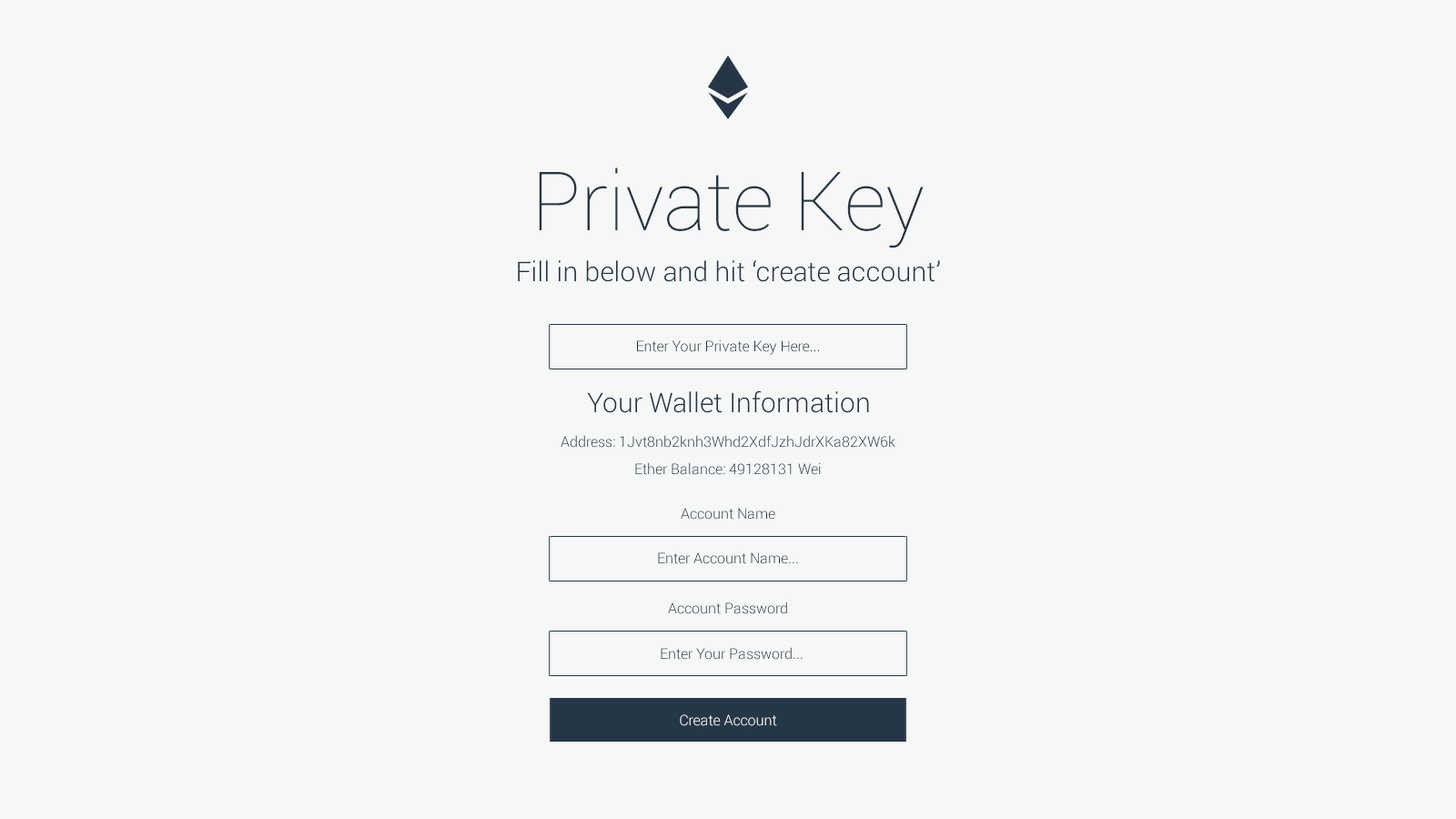
<style>
.page{position:relative;width:1456px;height:819px;background:#f6f7f7}
.page>*{position:absolute;margin:0}
.t1{font:81.9px "Roboto-Thin";color:#253746}
.t2{font:27.3px "Roboto-Light";color:#253746}
.t3{font:14.6px "Roboto-Light";color:#253746}
.t4{font:14.6px/27.3px "Roboto-Light";color:#253746}
.t5{font:14.6px "Roboto-Light";color:#ffffff}
</style>
<div class="page">
<p class="t1" style="left:539px;top:167px;width:385px;height:81px">Private Key</p>
<p class="t2" style="left:518px;top:260px;width:422px;height:22px">Fill in below and hit ‘create account’</p>
<p class="t3" style="left:637px;top:339px;width:182px;height:16px">Enter Your Private Key Here...</p>
<p class="t2" style="left:587px;top:390px;width:282px;height:23px">Your Wallet Information</p>
<p class="t4" style="left:561px;top:435px;width:334px;height:40px;text-align:center">Address: 1Jvt8nb2knh3Whd2XdfJzhJdrXKa82XW6k<br>Ether Balance: 49128131 Wei</p>
<p class="t3" style="left:681px;top:508px;width:94px;height:12px">Account Name</p>
<p class="t3" style="left:658px;top:552px;width:140px;height:12px">Enter Account Name...</p>
<p class="t3" style="left:668px;top:602px;width:119px;height:12px">Account Password</p>
<p class="t3" style="left:661px;top:647px;width:142px;height:13px">Enter Your Password...</p>
<p class="t5" style="left:680px;top:714px;width:97px;height:12px">Create Account</p>
</div>
